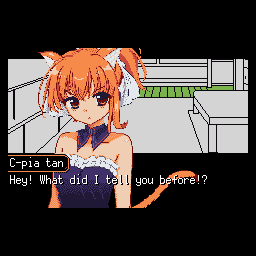
<style>
.page{position:relative;width:256px;height:256px;background:#000000}
.page>*{position:absolute;margin:0}
.t1{font:12px "PixelMplus12-Regular";color:#ffffff}
</style>
<div class="page">
<p class="t1" style="left:10px;top:157px;width:53px;height:12px">C-pia tan</p>
<p class="t1" style="left:10px;top:174px;width:197px;height:12px">Hey! What did I tell you before!?</p>
</div>
